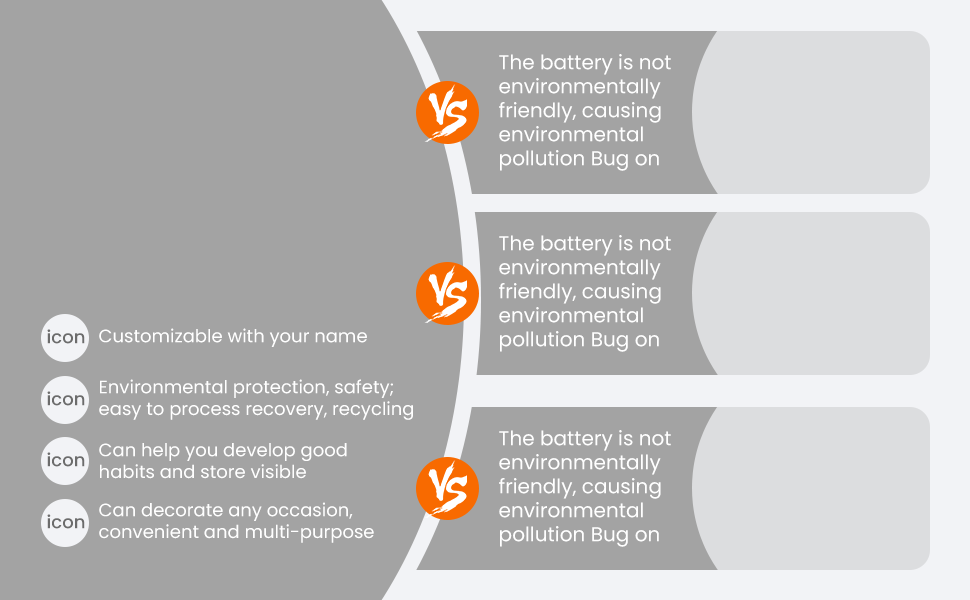
<style>
.page{position:relative;width:970px;height:600px;background:#a3a3a3}
.page>*{position:absolute;margin:0}
.t1{font:20px "Poppins-Regular";color:#ffffff}
.t2{font:18px "Poppins-Medium";color:#6c6c6c}
.t3{font:18px "Poppins-Regular";color:#ffffff}
</style>
<div class="page">
<p class="t1" style="left:499px;top:54px;width:172px;height:117px">The battery is not<br>environmentally<br>friendly, causing<br>environmental<br>pollution Bug on</p>
<p class="t1" style="left:499px;top:235px;width:172px;height:117px">The battery is not<br>environmentally<br>friendly, causing<br>environmental<br>pollution Bug on</p>
<p class="t2" style="left:47px;top:329px;width:38px;height:15px">icon</p>
<p class="t3" style="left:99px;top:328px;width:268px;height:19px">Customizable with your name</p>
<p class="t3" style="left:99px;top:379px;width:314px;height:41px">Environmental protection, safety;<br>easy to process recovery, recycling</p>
<p class="t2" style="left:47px;top:391px;width:38px;height:15px">icon</p>
<p class="t1" style="left:499px;top:430px;width:172px;height:117px">The battery is not<br>environmentally<br>friendly, causing<br>environmental<br>pollution Bug on</p>
<p class="t3" style="left:99px;top:443px;width:248px;height:36px">Can help you develop good<br>habits and store visible</p>
<p class="t2" style="left:47px;top:452px;width:38px;height:15px">icon</p>
<p class="t3" style="left:99px;top:502px;width:275px;height:41px">Can decorate any occasion, <br>convenient and multi-purpose</p>
<p class="t2" style="left:47px;top:514px;width:38px;height:15px">icon</p>
</div>
